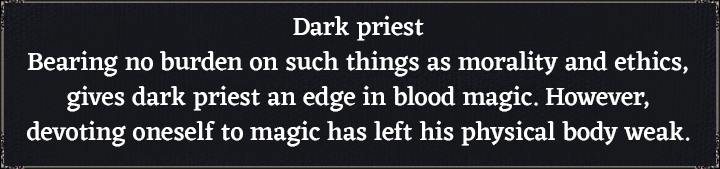
<style>
.page{position:relative;width:720px;height:169px}
.page>*{position:absolute;margin:0}
.t1{font:26px/35px "Eczar-Medium";color:#ffffff}
</style>
<div class="page">
<p class="t1" style="left:26px;top:15px;width:664px;height:132px;text-align:center">Dark priest<br>Bearing no burden on such things as morality and ethics,<br>gives dark priest an edge in blood magic. However,<br>devoting oneself to magic has left his physical body weak.</p>
</div>
